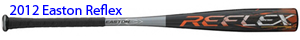
<style>
.page{position:relative;width:300px;height:40px;background:#ffffff}
.page>*{position:absolute;margin:0}
.t1{font:14.5px "MyriadPro-Regular";color:#0000ff}
</style>
<div class="page">
<p class="t1" style="left:10px;top:4px;width:112px;height:11px">2012 Easton Reflex</p>
</div>
